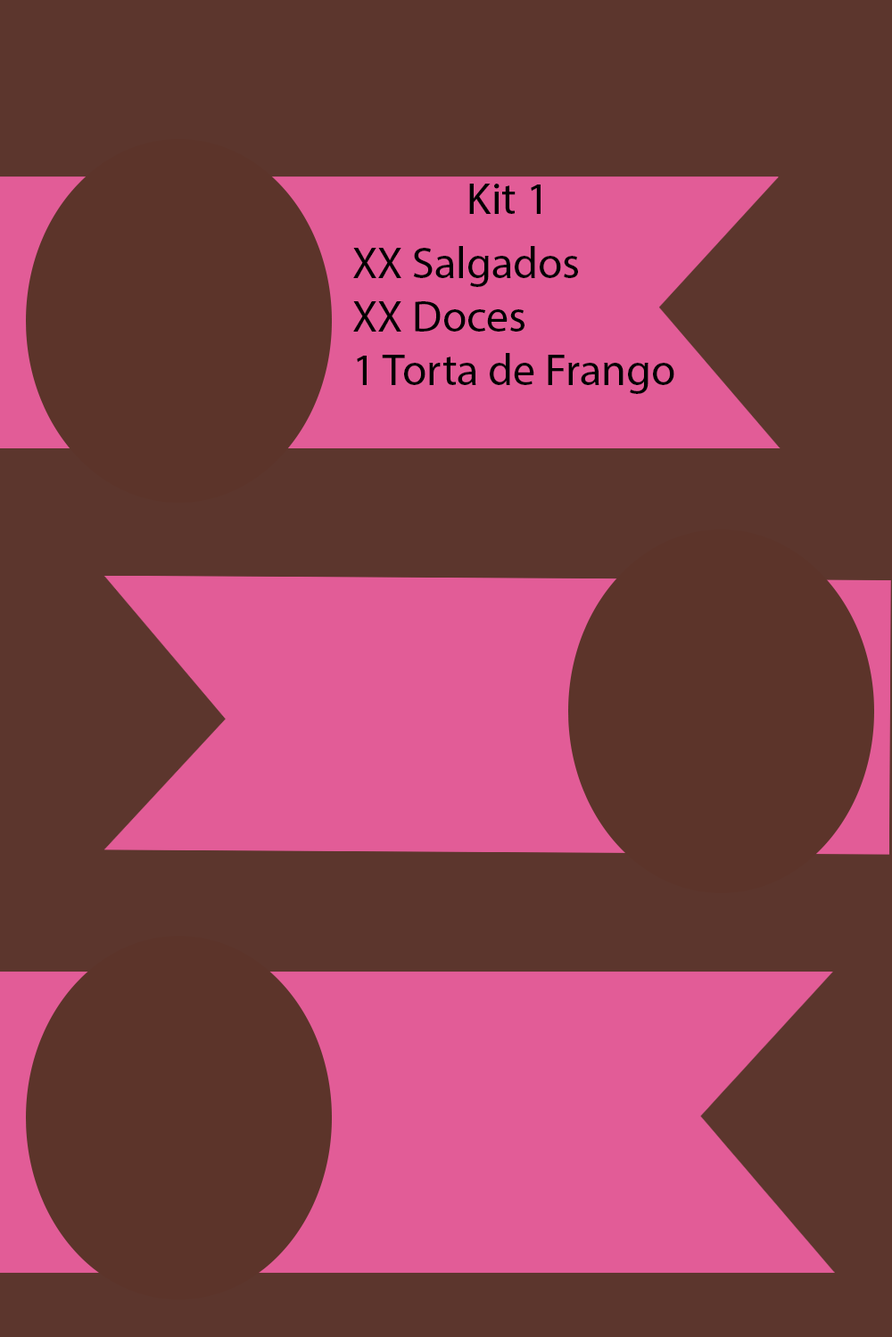
<style>
.page{position:relative;width:892px;height:1337px;background:#5c362d}
.page>*{position:absolute;margin:0}
.t1{font:44.6px "MyriadPro-Regular";color:#000000}
</style>
<div class="page">
<p class="t1" style="left:469px;top:184px;width:71px;height:30px">Kit 1</p>
<p class="t1" style="left:353px;top:246px;width:321px;height:148px">XX Salgados<br>XX Doces<br>1 Torta de Frango</p>
</div>
